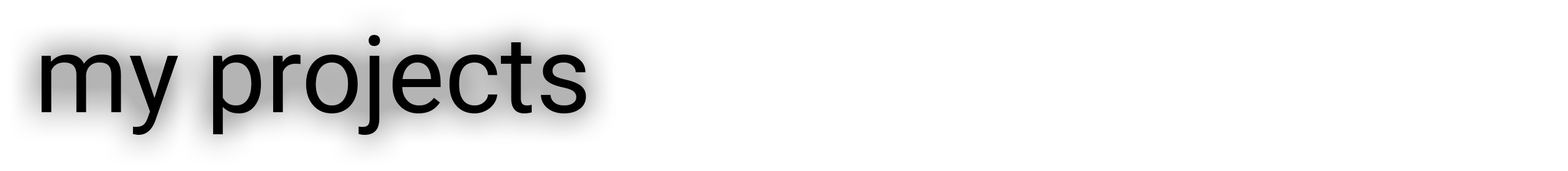
<style>
.page{position:relative;width:1568px;height:171px;background:#ffffff}
.page>*{position:absolute;margin:0}
.t1{font:107.2px "Roboto-Regular";color:#000000}
.t2{font:73.5px "Roboto-Regular";color:#b1c9e7}
</style>
<div class="page">
<p class="t1" style="left:41px;top:35px;width:545px;height:100px"><span class="t2"><br></span> my projects</p>
</div>
